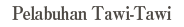
<style>
.page{position:relative;width:184px;height:27px;background:#ffffff}
.page>*{position:absolute;margin:0}
.t1{font:18px "RyuminPro-ExBold";letter-spacing:-0.04em;color:#4c4843;scale:0.9 1}
</style>
<div class="page">
<p class="t1" style="left:12px;top:6px;width:160px;height:14px">Pelabuhan Tawi-Tawi</p>
</div>
